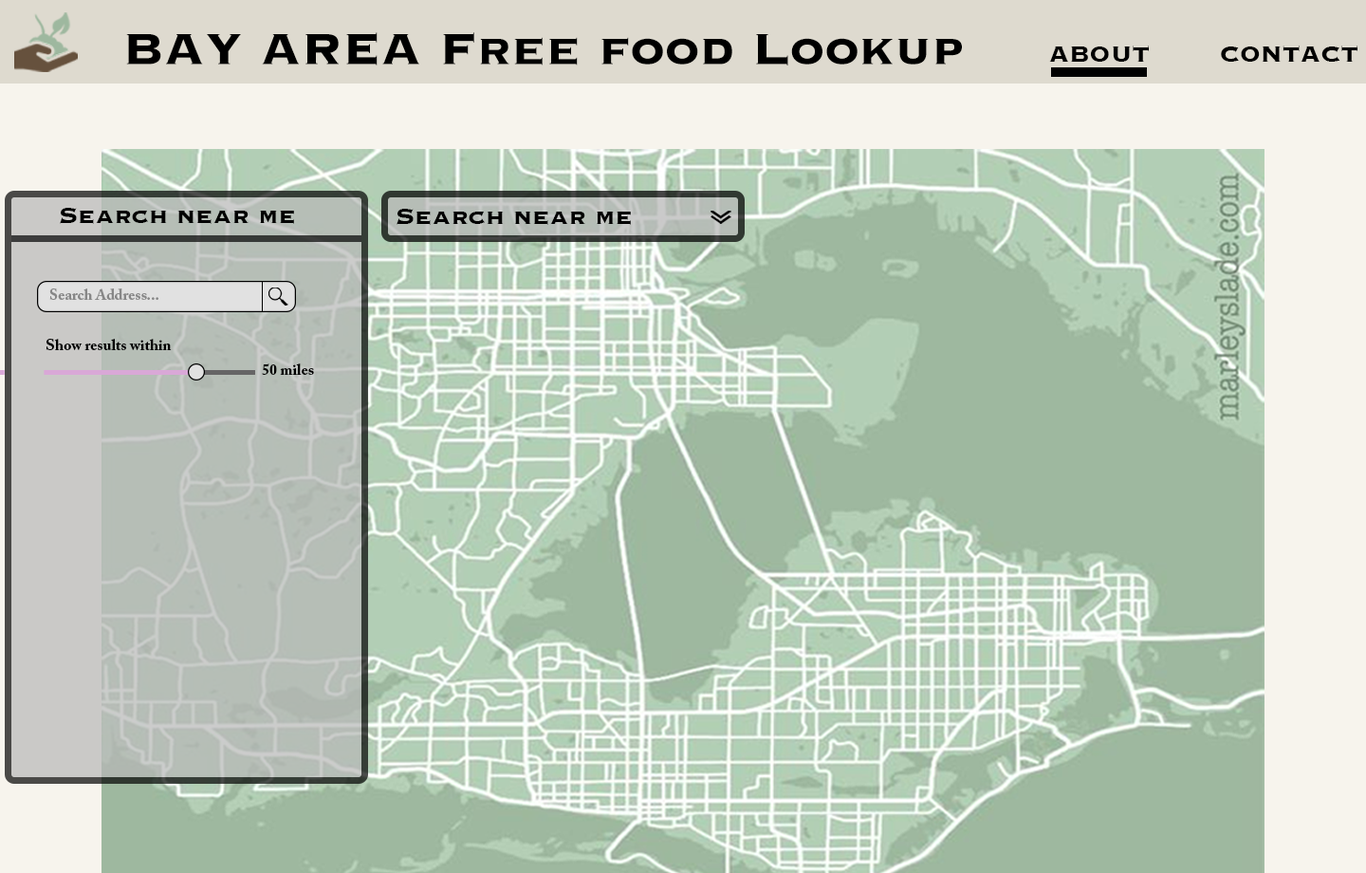
<style>
.page{position:relative;width:1366px;height:873px}
.page>*{position:absolute;margin:0}
.t1{font:56.9px "Copperplate-Bold";color:#000000}
.t2{font:28.5px "Copperplate-Bold";color:#000000}
.t3{font:15.2px "ACaslonPro-Bold";color:#878787}
.t4{font:15.2px "ACaslonPro-Bold";color:#000000}
</style>
<div class="page">
<p class="t1" style="left:126px;top:32px;width:836px;height:33px">BAY AREA Free food Lookup</p>
<p class="t2" style="left:1049px;top:46px;width:309px;height:16px">ABOUT   CONTACT</p>
<p class="t2" style="left:60px;top:208px;width:234px;height:16px">Search near me</p>
<p class="t2" style="left:397px;top:209px;width:234px;height:16px">Search near me</p>
<p class="t3" style="left:49px;top:288px;width:109px;height:12px">Search Address...</p>
<p class="t4" style="left:46px;top:339px;width:126px;height:11px">Show results within</p>
<p class="t4" style="left:262px;top:363px;width:52px;height:12px">50 miles</p>
</div>
